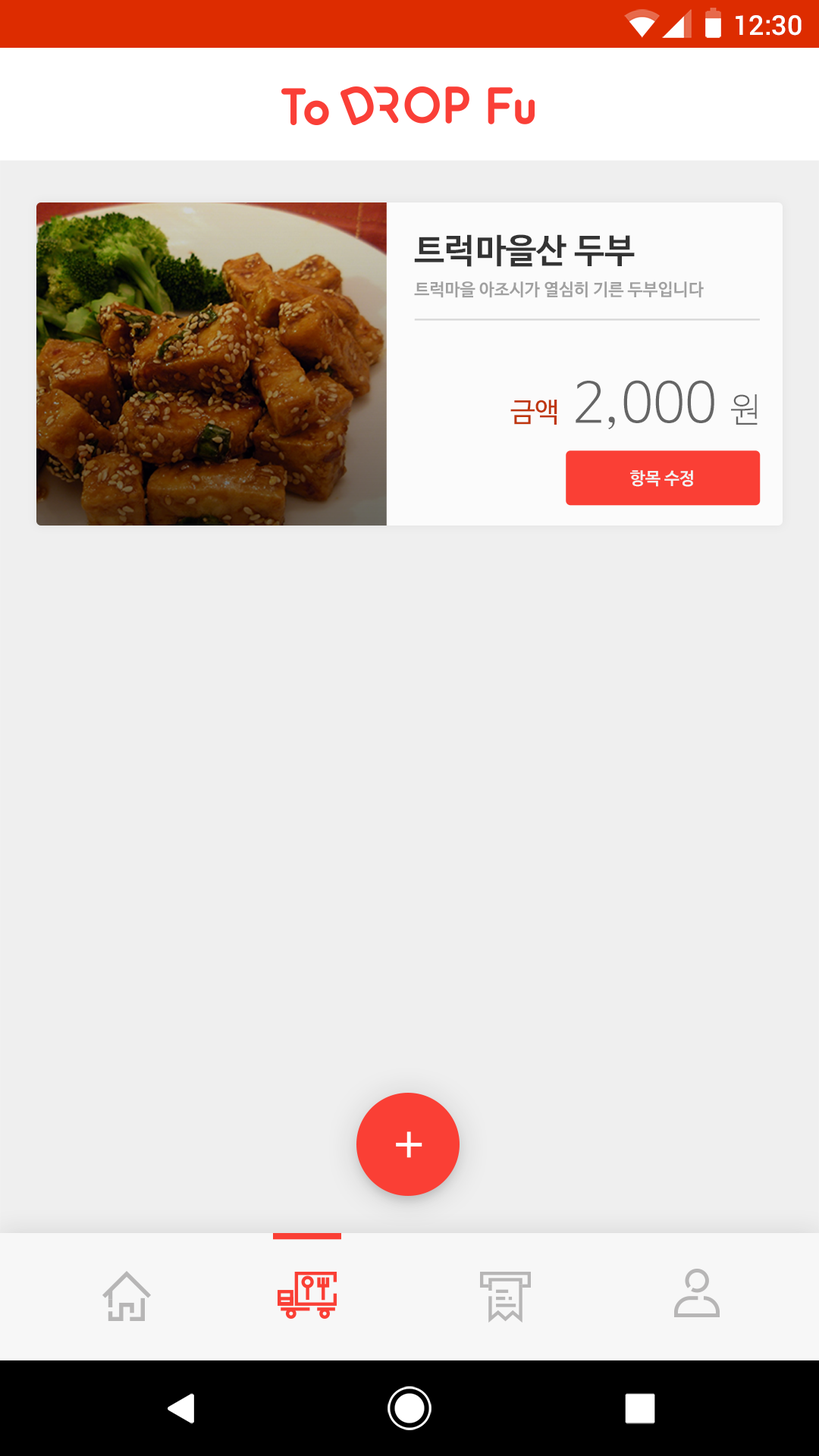
<style>
.page{position:relative;width:819px;height:1456px;background:#efefef}
.page>*{position:absolute;margin:0}
.t1{font:27.3px "Roboto-Medium";color:#ffffff}
.t2{font:34.1px "NanumBarunGothicBold";color:#333333}
.t3{font:17.1px "NanumBarunGothicBold";color:#a0a0a0}
.t4{font:55px "NanumBarunGothicLight";color:#656565}
.t5{font:34.1px "NanumBarunGothicLight";color:#656565}
.t6{font:27.3px "NanumBarunGothic";color:#bf360c}
.t7{font:17.1px "NanumBarunGothicBold";color:#f2f2f2}
</style>
<div class="page">
<p class="t1" style="left:736px;top:15px;width:66px;height:21px">12:30</p>
<p class="t2" style="left:414px;top:234px;width:221px;height:33px">트럭마을산 두부</p>
<p class="t3" style="left:414px;top:281px;width:290px;height:17px">트럭마을 아조시가 열심히 기른 두부입니다</p>
<p class="t4" style="left:576px;top:380px;width:182px;height:49px">2,000 <span class="t5">원</span></p>
<p class="t6" style="left:510px;top:400px;width:47px;height:25px">금액</p>
<p class="t7" style="left:630px;top:470px;width:63px;height:17px">항목 수정</p>
</div>
